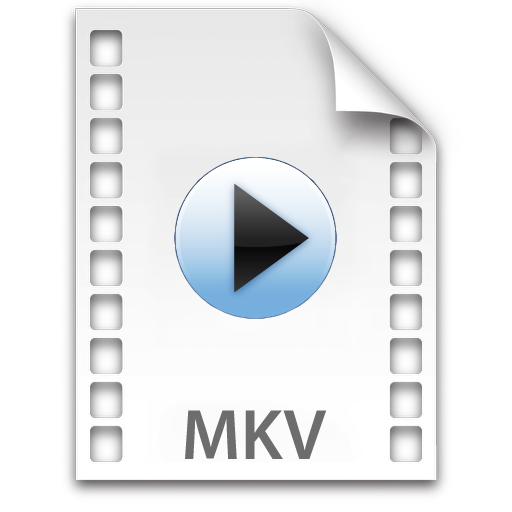
<style>
.page{position:relative;width:512px;height:512px;background:#ffffff}
.page>*{position:absolute;margin:0}
.t1{font:72px "MyriadPro-Semibold";color:#6e6d6d}
</style>
<div class="page">
<p class="t1" style="left:185px;top:410px;width:142px;height:49px">MKV</p>
</div>
